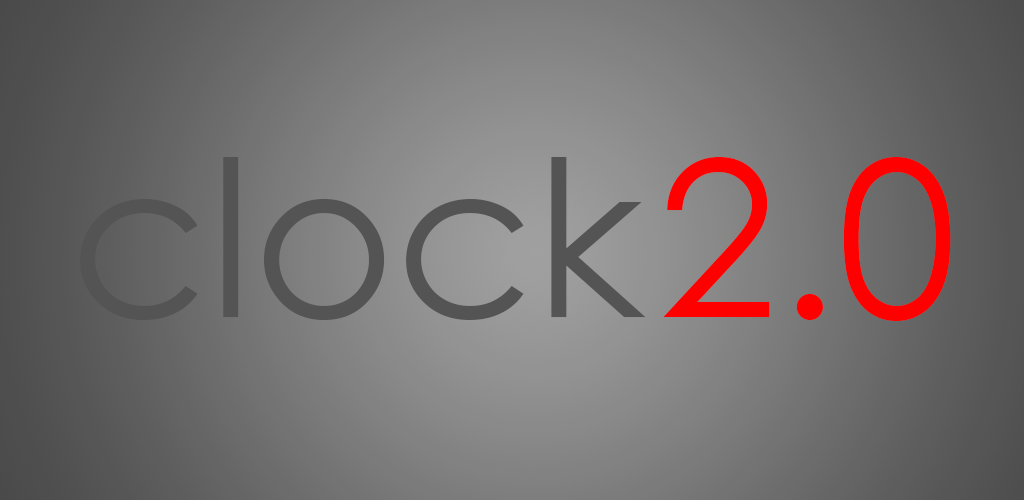
<style>
.page{position:relative;width:1024px;height:500px}
.page>*{position:absolute;margin:0}
.t1{font:217px "CenturyGothic";color:#545454}
.t2{font:217px "CenturyGothic";color:#ff0000}
</style>
<div class="page">
<p class="t1" style="left:80px;top:157px;width:566px;height:163px">clock</p>
<p class="t2" style="left:663px;top:157px;width:288px;height:164px">2.0</p>
</div>
